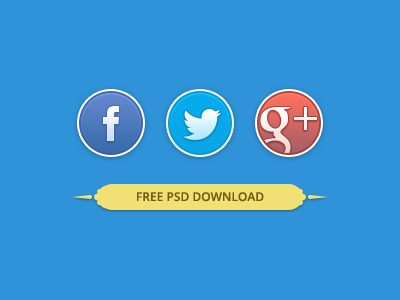
<style>
.page{position:relative;width:400px;height:300px;background:#2f93d9}
.page>*{position:absolute;margin:0}
.t1{font:12px "OpenSans-Semibold";color:#695e11}
</style>
<div class="page">
<p class="t1" style="left:137px;top:192px;width:127px;height:10px">FREE PSD DOWNLOAD</p>
</div>
